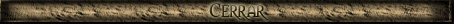
<style>
.page{position:relative;width:454px;height:24px}
.page>*{position:absolute;margin:0}
.t1{font:19px "Morpheus"}
</style>
<div class="page">
<p class="t1" style="left:209px;top:3px;width:61px;height:17px">Cerrar</p>
</div>
